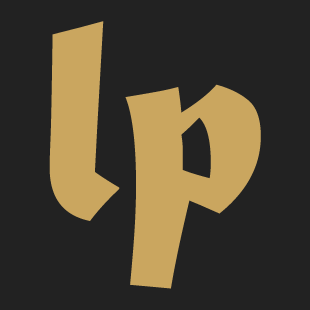
<style>
.page{position:relative;width:310px;height:310px;background:#222222}
.page>*{position:absolute;margin:0}
.t1{font:300px "MaturaMTScriptCapitals";color:#caa65f}
</style>
<div class="page">
<p class="t1" style="left:49px;top:21px;width:212px;height:268px">lp</p>
</div>
